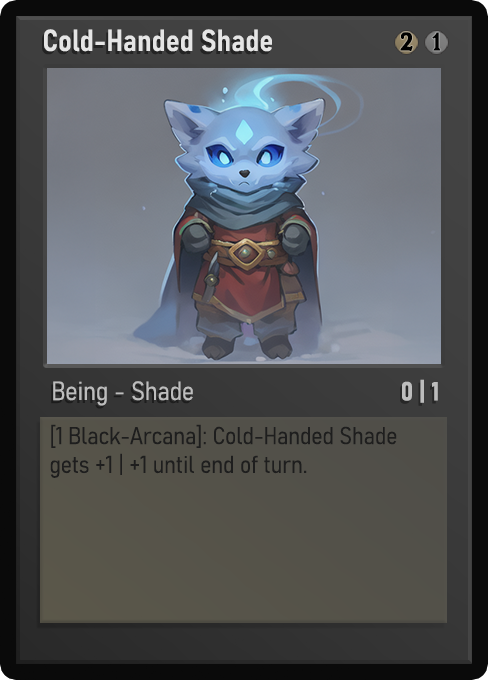
<style>
.page{position:relative;width:488px;height:680px}
.page>*{position:absolute;margin:0}
.t1{font:30px "Bahnschrift-SemiBoldSemiCondensed";color:#f2f2f2;font-weight:bold}
.t2{font:25px "WTRRoycroft";color:#000000;font-weight:bold;scale:1.09 1}
.t3{font:26px "Bahnschrift-LightSemiCondensed";color:#c8c8c8;font-weight:bold}
.t4{font:26px "Bahnschrift-BoldSemiCondensed";color:#bdbdbd;font-weight:bold}
.t5{font:24px "Bahnschrift-LightSemiCondensed";color:#1e1e1e;font-weight:bold}
</style>
<div class="page">
<p class="t1" style="left:44px;top:29px;width:228px;height:23px;opacity:0.9">Cold-Handed Shade</p>
<p class="t2" style="left:400px;top:32px;width:13px;height:19px">2</p>
<p class="t2" style="left:432px;top:32px;width:9px;height:19px">1</p>
<p class="t3" style="left:53px;top:381px;width:140px;height:25px;opacity:0.9">Being - Shade</p>
<p class="t4" style="left:402px;top:379px;width:36px;height:24px">0 | 1</p>
<p class="t5" style="left:50px;top:424px;width:347px;height:54px">[1 Black-Arcana]: Cold-Handed Shade gets +1 | +1 until end of turn.</p>
</div>
